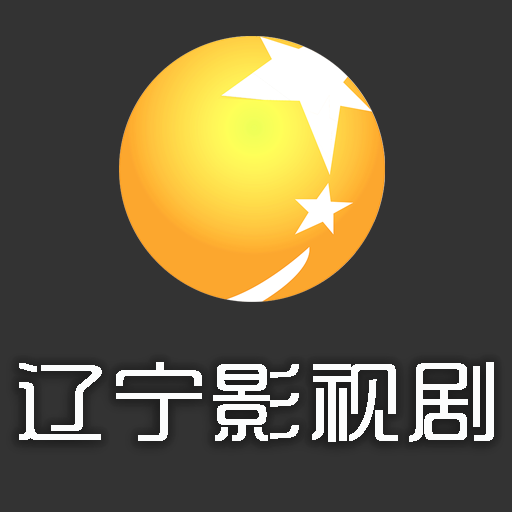
<style>
.page{position:relative;width:512px;height:512px;background:#333333}
.page>*{position:absolute;margin:0}
.t1{font:93.3px "SJshishang-Regular";letter-spacing:0.02em;color:#fcfdfd;font-weight:bold}
</style>
<div class="page">
<p class="t1" style="left:19px;top:362px;width:475px;height:80px">辽宁影视剧</p>
</div>
